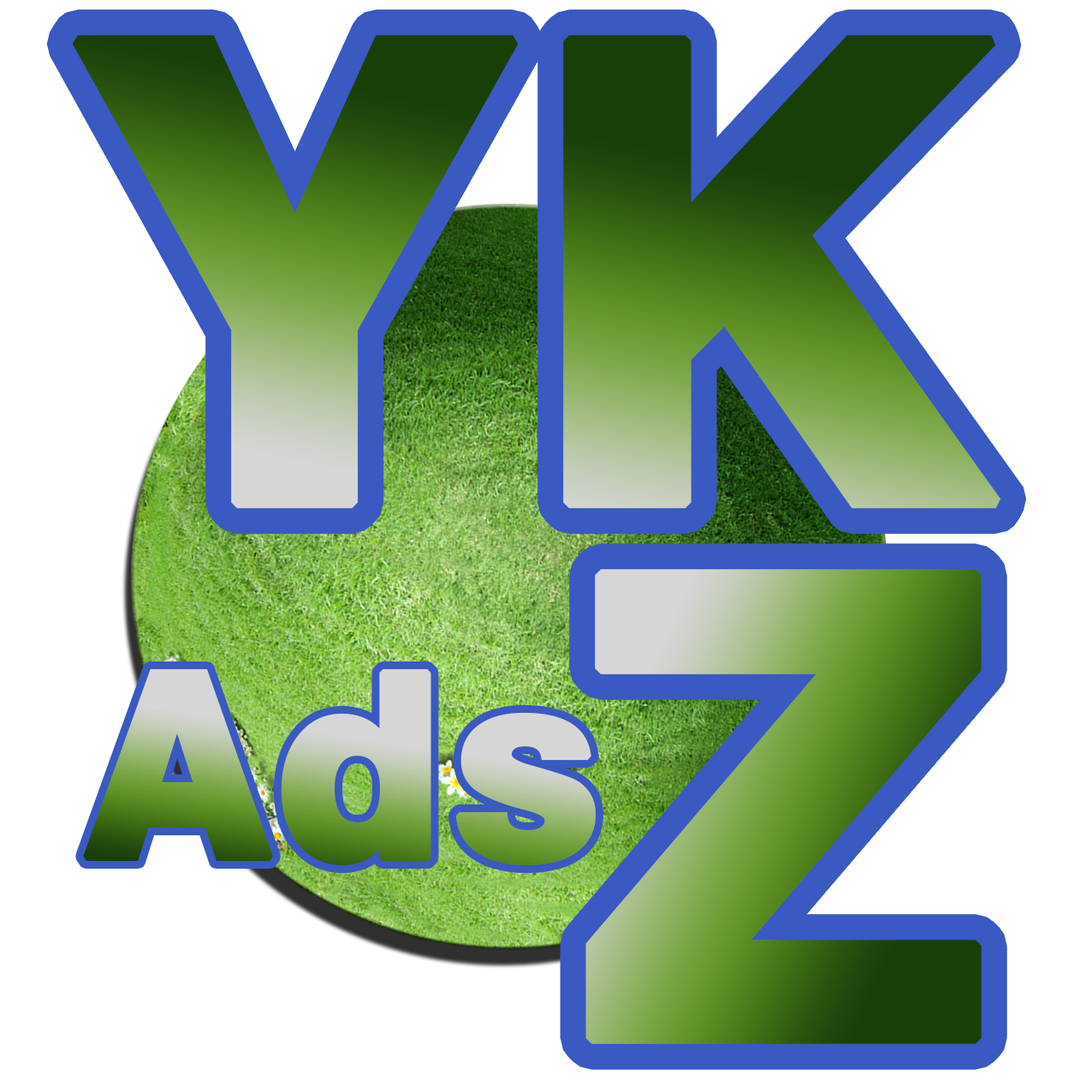
<style>
.page{position:relative;width:1092px;height:1092px;background:#ffffff}
.page>*{position:absolute;margin:0}
.t1{font:641.7px "Swiss721BT-Heavy";font-weight:bold}
.t2{font:644px "Swiss721BT-Heavy";font-weight:bold}
</style>
<div class="page">
<p class="t1" style="left:72px;top:35px;width:929px;height:473px">YK</p>
<p class="t2" style="left:585px;top:569px;width:397px;height:475px">Z</p>
</div>
